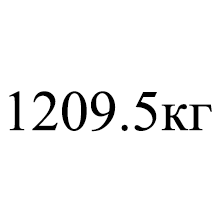
<style>
.page{position:relative;width:221px;height:221px;background:#ffffff}
.page>*{position:absolute;margin:0}
.t1{font:57.5px "TimesNewRomanPSMT";color:#000000}
</style>
<div class="page">
<p class="t1" style="left:9px;top:91px;width:203px;height:41px">1209.5кг</p>
</div>
